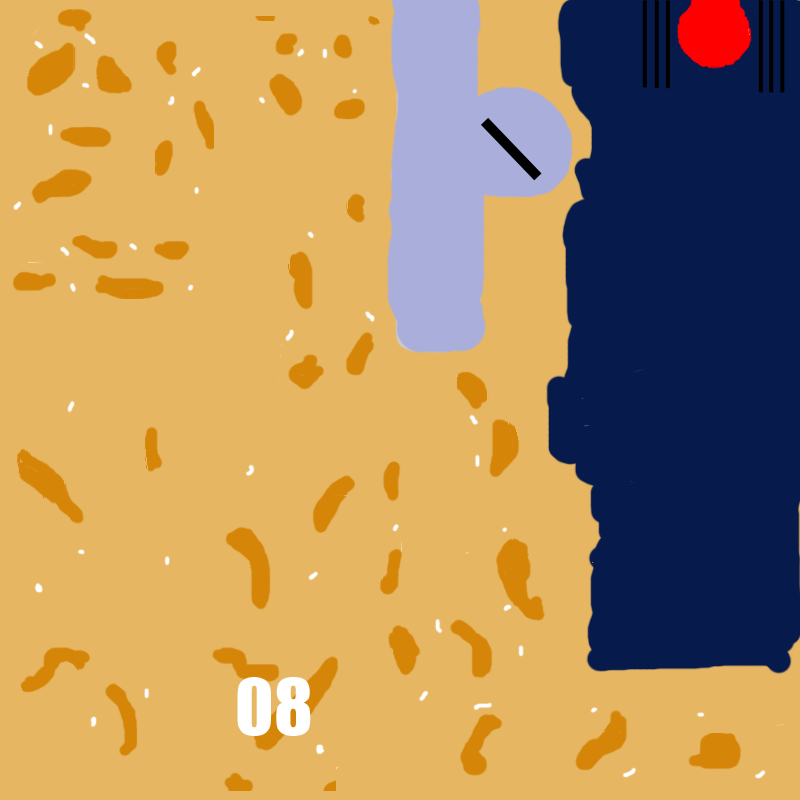
<style>
.page{position:relative;width:800px;height:800px;background:#e6b662}
.page>*{position:absolute;margin:0}
.t1{font:72px "Impact";color:#ffffff}
</style>
<div class="page">
<p class="t1" style="left:237px;top:677px;width:74px;height:59px">08</p>
</div>
